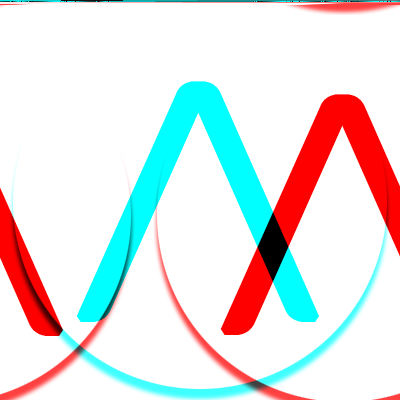
<style>
.page{position:relative;width:400px;height:400px;background:#ffffff}
.page>*{position:absolute;margin:0}
.t1{font:314.8px "Carlito";letter-spacing:-0.06em;color:#00ffff;font-weight:bold}
</style>
<div class="page">
<p class="t1" style="left:76px;top:79px;width:243px;height:241px">/\</p>
</div>
